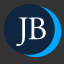
<style>
.page{position:relative;width:64px;height:64px;background:#0f2640}
.page>*{position:absolute;margin:0}
.t1{font:32.9px "AGaramondPro-Regular";letter-spacing:-0.045em;color:#fefefe}
</style>
<div class="page">
<p class="t1" style="left:16px;top:17px;width:30px;height:29px">JB</p>
</div>
